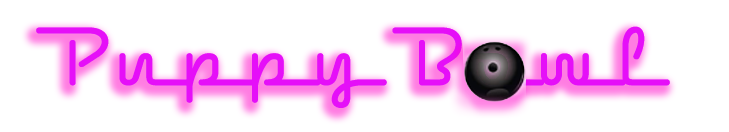
<style>
.page{position:relative;width:729px;height:132px;background:#ffffff}
.page>*{position:absolute;margin:0}
.t1{font:72px "NeonStream-Regular";color:#e50ff8}
</style>
<div class="page">
<p class="t1" style="left:36px;top:26px;width:634px;height:82px">Puppy Bowl</p>
</div>
